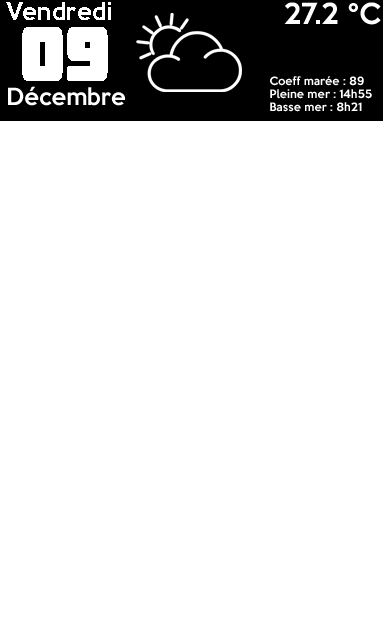
<style>
.page{position:relative;width:383px;height:640px;background:#ffffff}
.page>*{position:absolute;margin:0}
.t1{font:22.4px "KeepCalm-Medium";color:#ffffff}
.t2{font:26.5px "KeepCalm-Medium";color:#ffffff}
.t3{font:72px "Goma-Block";color:#ffffff}
.t4{font:10.6px "KeepCalm-Medium";color:#ffffff}
.t5{font:21.5px "KeepCalm-Medium";color:#ffffff}
</style>
<div class="page">
<p class="t1" style="left:6px;top:2px;width:105px;height:18px">Vendredi</p>
<p class="t2" style="left:284px;top:2px;width:97px;height:23px">27.2 °C</p>
<p class="t3" style="left:22px;top:27px;width:86px;height:54px">09</p>
<p class="t4" style="left:270px;top:76px;width:102px;height:36px">Coeff marée : 89<br>Pleine mer : 14h55<br>Basse mer : 8h21</p>
<p class="t5" style="left:8px;top:86px;width:118px;height:20px">Décembre</p>
</div>
